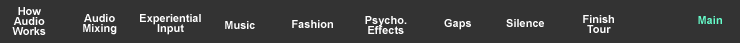
<style>
.page{position:relative;width:740px;height:43px;background:#333333}
.page>*{position:absolute;margin:0}
.t1{font:11px/10px "Arial-BoldMT";color:#ffffff}
.t2{font:11px "Arial-BoldMT";color:#66ffcc}
.t3{font:11px "Arial-BoldMT";color:#ffffff}
</style>
<div class="page">
<p class="t1" style="left:12px;top:7px;width:34px;height:28px;text-align:center">How<br>Audio<br>Works</p>
<p class="t1" style="left:83px;top:14px;width:34px;height:21px;text-align:center">Audio<br>Mixing</p>
<p class="t1" style="left:140px;top:14px;width:61px;height:21px;text-align:center">Experiential<br>Input</p>
<p class="t1" style="left:365px;top:16px;width:42px;height:18px;text-align:center">Psycho.<br>Effects</p>
<p class="t1" style="left:583px;top:15px;width:31px;height:18px;text-align:center">Finish<br>Tour</p>
<p class="t2" style="left:698px;top:16px;width:24px;height:8px">Main</p>
<p class="t3" style="left:225px;top:21px;width:30px;height:8px">Music</p>
<p class="t3" style="left:292px;top:20px;width:41px;height:8px">Fashion</p>
<p class="t3" style="left:444px;top:19px;width:27px;height:11px">Gaps</p>
<p class="t3" style="left:506px;top:19px;width:38px;height:8px">Silence</p>
</div>
